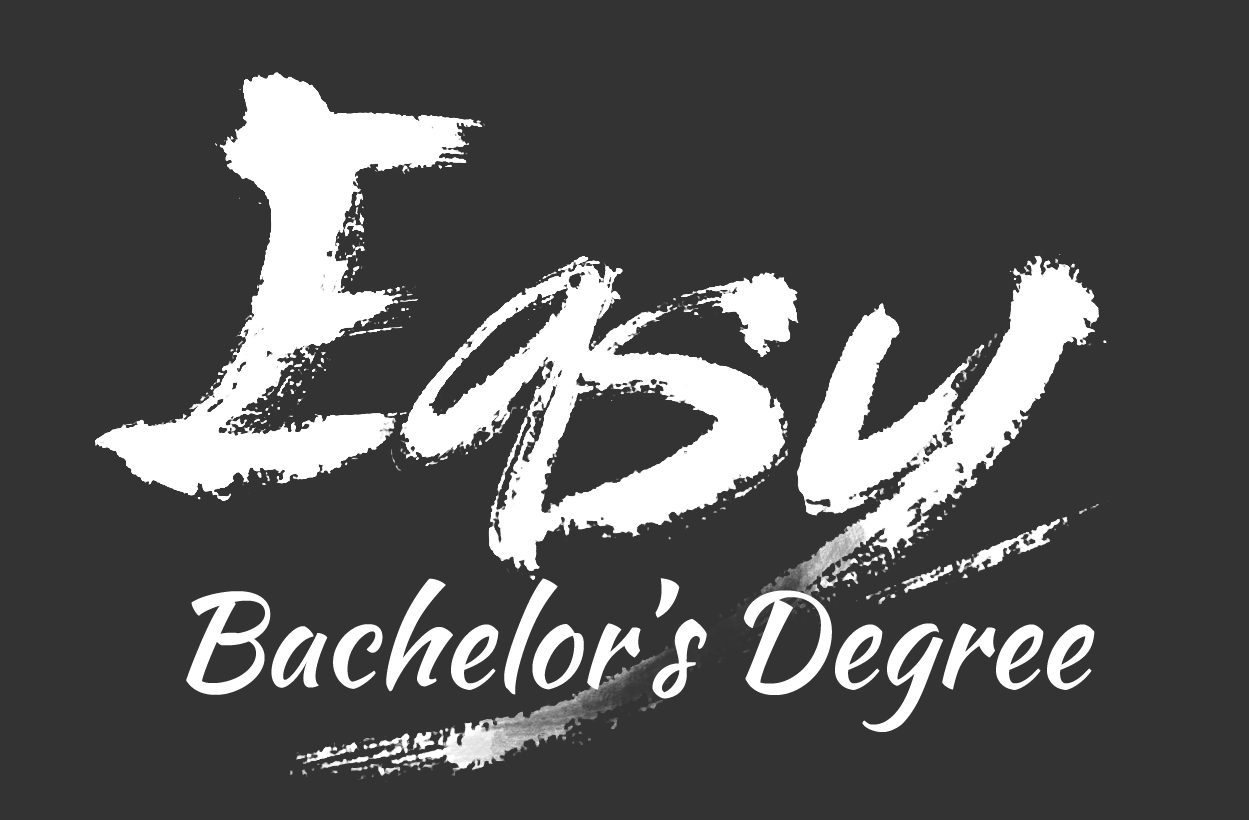
<style>
.page{position:relative;width:1249px;height:820px;background:#333333}
.page>*{position:absolute;margin:0}
.t1{font:128px "KaushanScript-Regular";color:#ffffff}
</style>
<div class="page">
<p class="t1" style="left:186px;top:578px;width:909px;height:154px">Bachelor’s Degree</p>
</div>
